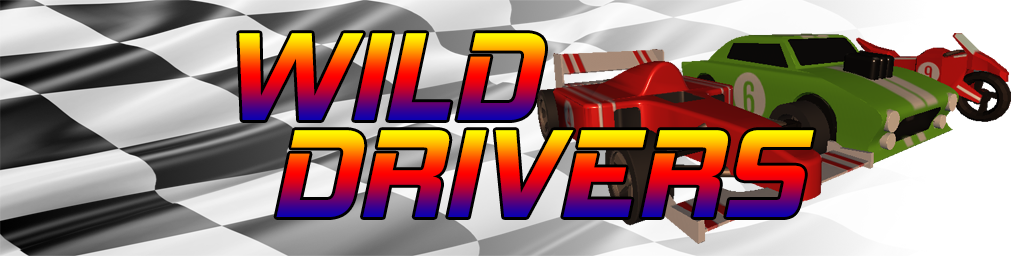
<style>
.page{position:relative;width:1024px;height:256px}
.page>*{position:absolute;margin:0}
.t1{font:128px "HemiHeadRg-BoldItalic"}
</style>
<div class="page">
<p class="t1" style="left:239px;top:33px;width:306px;height:87px">WILD</p>
<p class="t1" style="left:276px;top:130px;width:538px;height:87px">DRIVERS</p>
</div>
